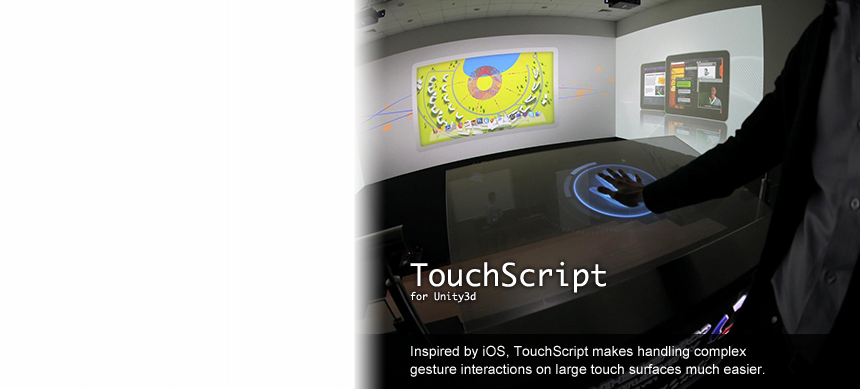
<style>
.page{position:relative;width:860px;height:389px;background:#fefefe}
.page>*{position:absolute;margin:0}
.t1{font:30px "Monaco";color:#ffffff}
.t2{font:10px "Monaco";color:#ffffff}
.t3{font:14px/18px "ArialMT";color:#ffffff}
</style>
<div class="page">
<p class="t1" style="left:410px;top:261px;width:196px;height:32px">TouchScript</p>
<p class="t2" style="left:410px;top:291px;width:66px;height:12px">for Unity3d</p>
<p class="t3" style="left:410px;top:345px;width:355px;height:32px">Inspired by iOS, TouchScript makes handling complex <br>gesture interactions on large touch surfaces much easier.</p>
</div>
